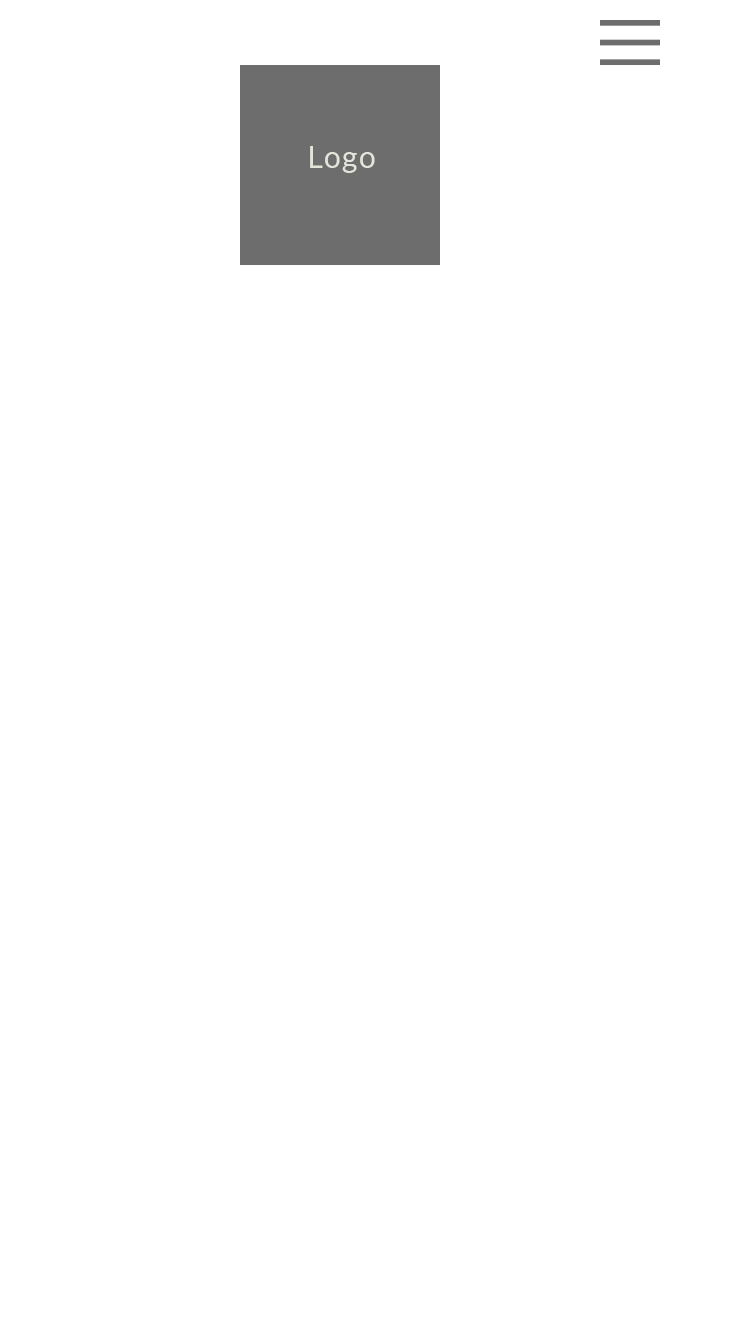
<style>
.page{position:relative;width:750px;height:1334px;background:#ffffff}
.page>*{position:absolute;margin:0}
.t1{font:30px "Lato-Regular";letter-spacing:0.05em;color:#e2e5da}
</style>
<div class="page">
<p class="t1" style="left:310px;top:146px;width:65px;height:27px">Logo</p>
</div>
